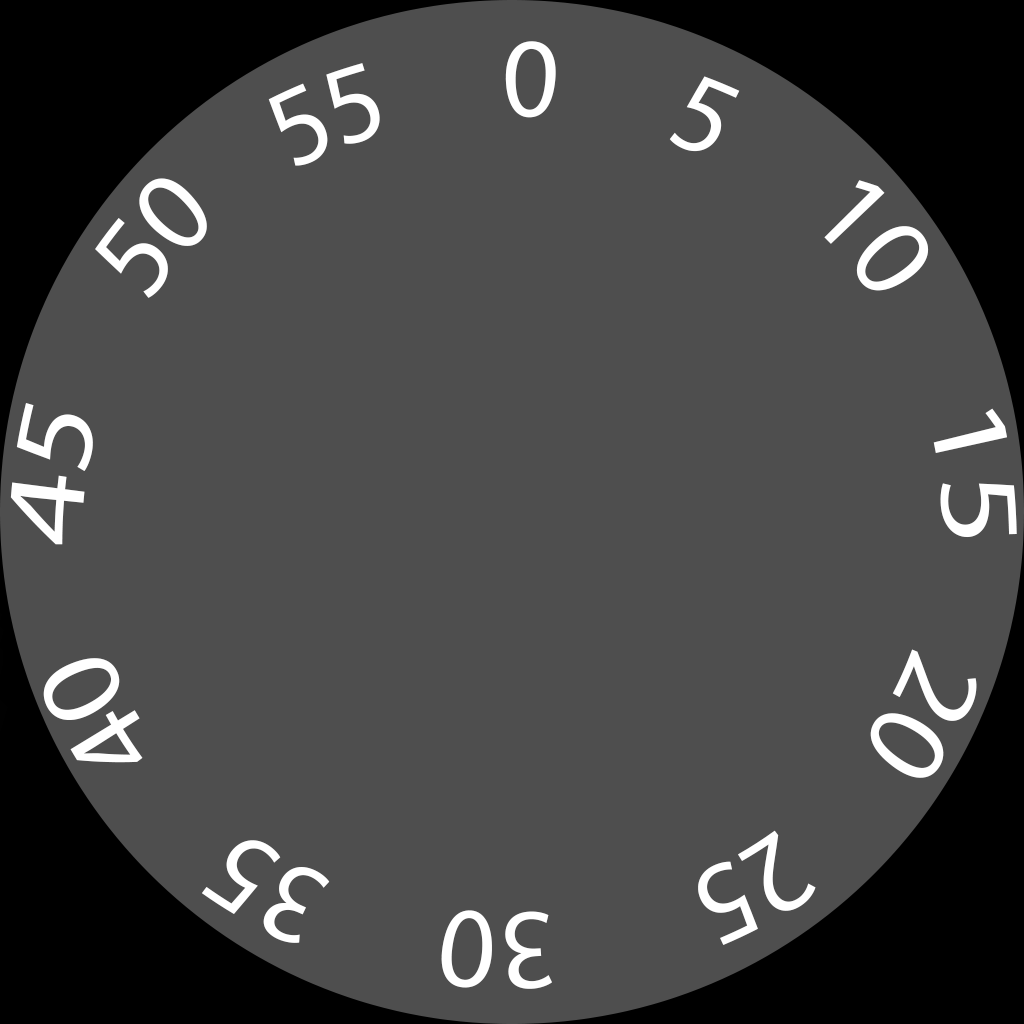
<style>
.page{position:relative;width:1024px;height:1024px;background:#4e4e4e}
.page>*{position:absolute;margin:0}
.t1{font:69px "MyriadPro-Regular";color:#ffffff}
.t2{font:70px "MyriadPro-Regular";color:#ffffff}
</style>
<div class="page">
<p class="t1" style="left:10px;top:41px;width:1007px;height:504px">45     50    55     0     5     10     15</p>
<p class="t2" style="left:43px;top:649px;width:934px;height:340px;rotate:180deg">20     25      30     35     40</p>
</div>
